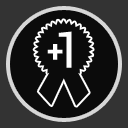
<style>
.page{position:relative;width:128px;height:128px;background:#0b0b0b}
.page>*{position:absolute;margin:0}
.t1{font:50px "Roboto-Regular";letter-spacing:0.04em;color:#ffffff}
.t2{font:30px "Roboto-Bold";letter-spacing:0.04em;color:#ffffff}
</style>
<div class="page">
<p class="t1" style="left:58px;top:31px;width:14px;height:37px">1</p>
<p class="t2" style="left:47px;top:44px;width:16px;height:16px">+</p>
</div>
